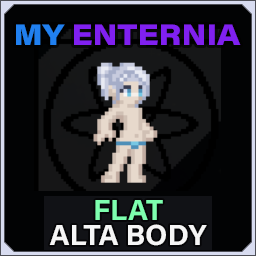
<style>
.page{position:relative;width:256px;height:256px;background:#020304}
.page>*{position:absolute;margin:0}
.t1{font:29.2px "AcuminConcept_760.000wght_112.000wdth";color:#8020f0}
.t2{font:29.2px "AcuminConcept_760.000wght_112.000wdth";color:#2080f0}
.t3{font:29.2px/25px "AcuminConcept-Bold";color:#f6f6f6}
.t4{font:29.2px/25px "AcuminConcept-Bold";color:#7effaf}
</style>
<div class="page">
<p class="t1" style="left:16px;top:24px;width:225px;height:21px"><span class="t2">MY </span>ENTERNIA</p>
<p class="t3" style="left:49px;top:200px;width:158px;height:46px;text-align:center"><span class="t4">FLAT<br></span>ALTA BODY</p>
</div>
